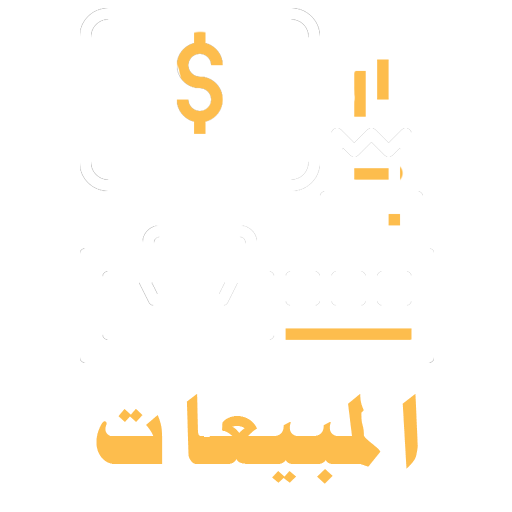
<style>
.page{position:relative;width:512px;height:512px;background:#ffffff}
.page>*{position:absolute;margin:0}
.t1{font:93px "Bader";letter-spacing:0.08em;color:#fdbd4d}
</style>
<div class="page">
<p class="t1" style="left:96px;top:394px;width:322px;height:90px">المبيعات</p>
</div>
